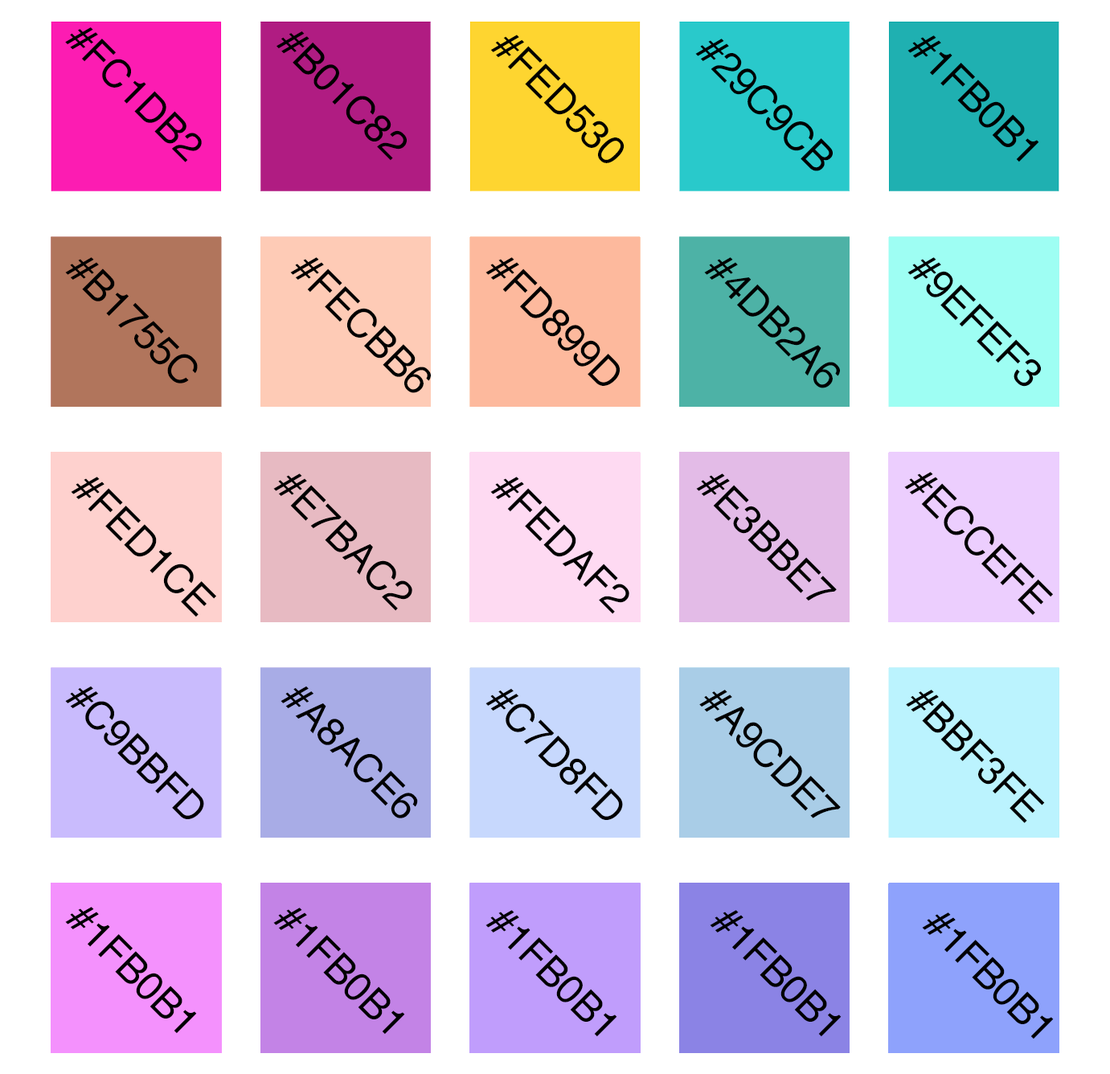
<style>
.page{position:relative;width:1110px;height:1074px;background:#ffffff}
.page>*{position:absolute;margin:0}
.t1{font:39.5px "Helvetica";color:#000000}
.t2{font:40.1px "Helvetica";color:#000000}
</style>
<div class="page">
<p class="t1" style="left:65px;top:27px;width:137px;height:135px;rotate:45deg">#FC1DB2</p>
<p class="t1" style="left:277px;top:31px;width:130px;height:130px;rotate:45deg">#B01C82</p>
<p class="t2" style="left:490px;top:35px;width:135px;height:128px;rotate:45deg">#FED530</p>
<p class="t2" style="left:695px;top:39px;width:138px;height:132px;rotate:45deg">#29C9CB</p>
<p class="t2" style="left:908px;top:35px;width:131px;height:127px;rotate:45deg">#1FB0B1</p>
<p class="t2" style="left:65px;top:257px;width:133px;height:126px;rotate:45deg">#B1755C</p>
<p class="t2" style="left:290px;top:257px;width:141px;height:136px;rotate:45deg">#FECBB6</p>
<p class="t2" style="left:486px;top:257px;width:134px;height:129px;rotate:45deg">#FD899D</p>
<p class="t2" style="left:704px;top:257px;width:136px;height:131px;rotate:45deg">#4DB2A6</p>
<p class="t2" style="left:908px;top:257px;width:133px;height:130px;rotate:45deg">#9EFEF3</p>
<p class="t2" style="left:273px;top:474px;width:139px;height:137px;rotate:45deg">#E7BAC2</p>
<p class="t2" style="left:696px;top:474px;width:141px;height:127px;rotate:45deg">#E3BBE7</p>
<p class="t2" style="left:904px;top:472px;width:149px;height:143px;rotate:45deg">#ECCEFE</p>
<p class="t2" style="left:71px;top:477px;width:145px;height:140px;rotate:45deg">#FED1CE</p>
<p class="t2" style="left:490px;top:477px;width:139px;height:137px;rotate:45deg">#FEDAF2</p>
<p class="t1" style="left:65px;top:686px;width:139px;height:133px;rotate:45deg">#C9BBFD</p>
<p class="t1" style="left:281px;top:686px;width:137px;height:132px;rotate:45deg">#A8ACE6</p>
<p class="t1" style="left:486px;top:688px;width:137px;height:132px;rotate:45deg">#C7D8FD</p>
<p class="t1" style="left:699px;top:690px;width:142px;height:128px;rotate:45deg">#A9CDE7</p>
<p class="t1" style="left:906px;top:690px;width:139px;height:133px;rotate:45deg">#BBF3FE</p>
<p class="t2" style="left:65px;top:907px;width:132px;height:127px;rotate:45deg">#1FB0B1</p>
<p class="t2" style="left:273px;top:908px;width:132px;height:127px;rotate:45deg">#1FB0B1</p>
<p class="t2" style="left:486px;top:910px;width:131px;height:127px;rotate:45deg">#1FB0B1</p>
<p class="t2" style="left:710px;top:910px;width:132px;height:127px;rotate:45deg">#1FB0B1</p>
<p class="t2" style="left:922px;top:912px;width:132px;height:127px;rotate:45deg">#1FB0B1</p>
</div>
